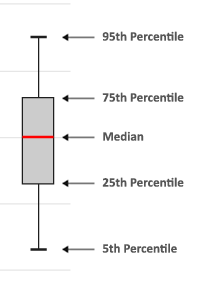
<style>
.page{position:relative;width:200px;height:296px;background:#ffffff}
.page>*{position:absolute;margin:0}
.t1{font:13px "Calibri-Bold";color:#565656}
</style>
<div class="page">
<p class="t1" style="left:102px;top:31px;width:82px;height:10px">95th Percentile</p>
<p class="t1" style="left:102px;top:92px;width:82px;height:10px">75th Percentile</p>
<p class="t1" style="left:103px;top:131px;width:41px;height:10px">Median</p>
<p class="t1" style="left:102px;top:177px;width:82px;height:10px">25th Percentile</p>
<p class="t1" style="left:102px;top:243px;width:75px;height:10px">5th Percentile</p>
</div>
